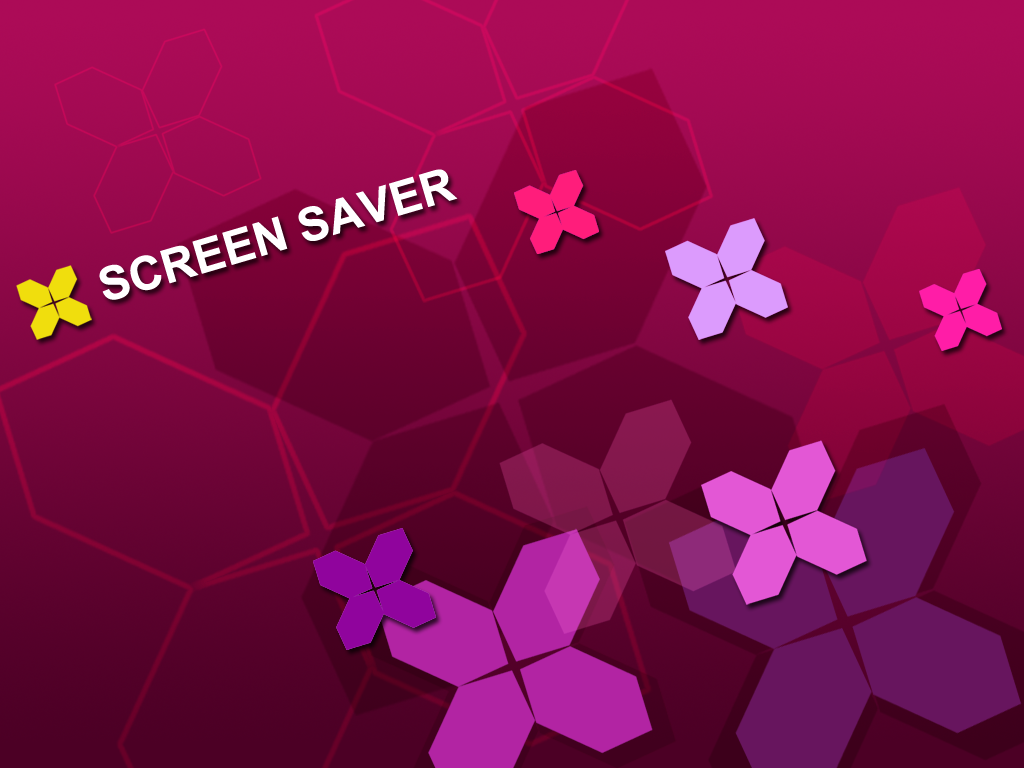
<style>
.page{position:relative;width:1024px;height:768px}
.page>*{position:absolute;margin:0}
.t1{font:46.7px "Arial-BoldMT";color:#ffffff}
</style>
<div class="page">
<p class="t1" style="left:99px;top:169px;width:359px;height:131px;rotate:-16deg">SCREEN SAVER</p>
</div>
